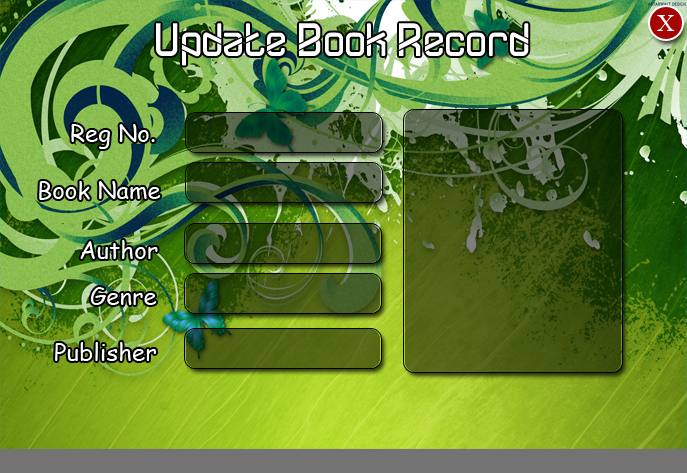
<style>
.page{position:relative;width:687px;height:473px}
.page>*{position:absolute;margin:0}
.t1{font:46.8px "DYLOVASTUFF";color:#fefefe;scale:0.93 1}
.t2{font:24px "ComicSansMS";color:#fefefe}
</style>
<div class="page">
<p class="t1" style="left:156px;top:23px;width:373px;height:43px">Update Book Record</p>
<p class="t2" style="left:71px;top:124px;width:84px;height:25px">Reg No.</p>
<p class="t2" style="left:39px;top:181px;width:122px;height:19px">Book Name</p>
<p class="t2" style="left:80px;top:240px;width:78px;height:19px">Author</p>
<p class="t2" style="left:90px;top:287px;width:67px;height:18px">Genre</p>
<p class="t2" style="left:55px;top:342px;width:101px;height:19px">Publisher</p>
</div>
